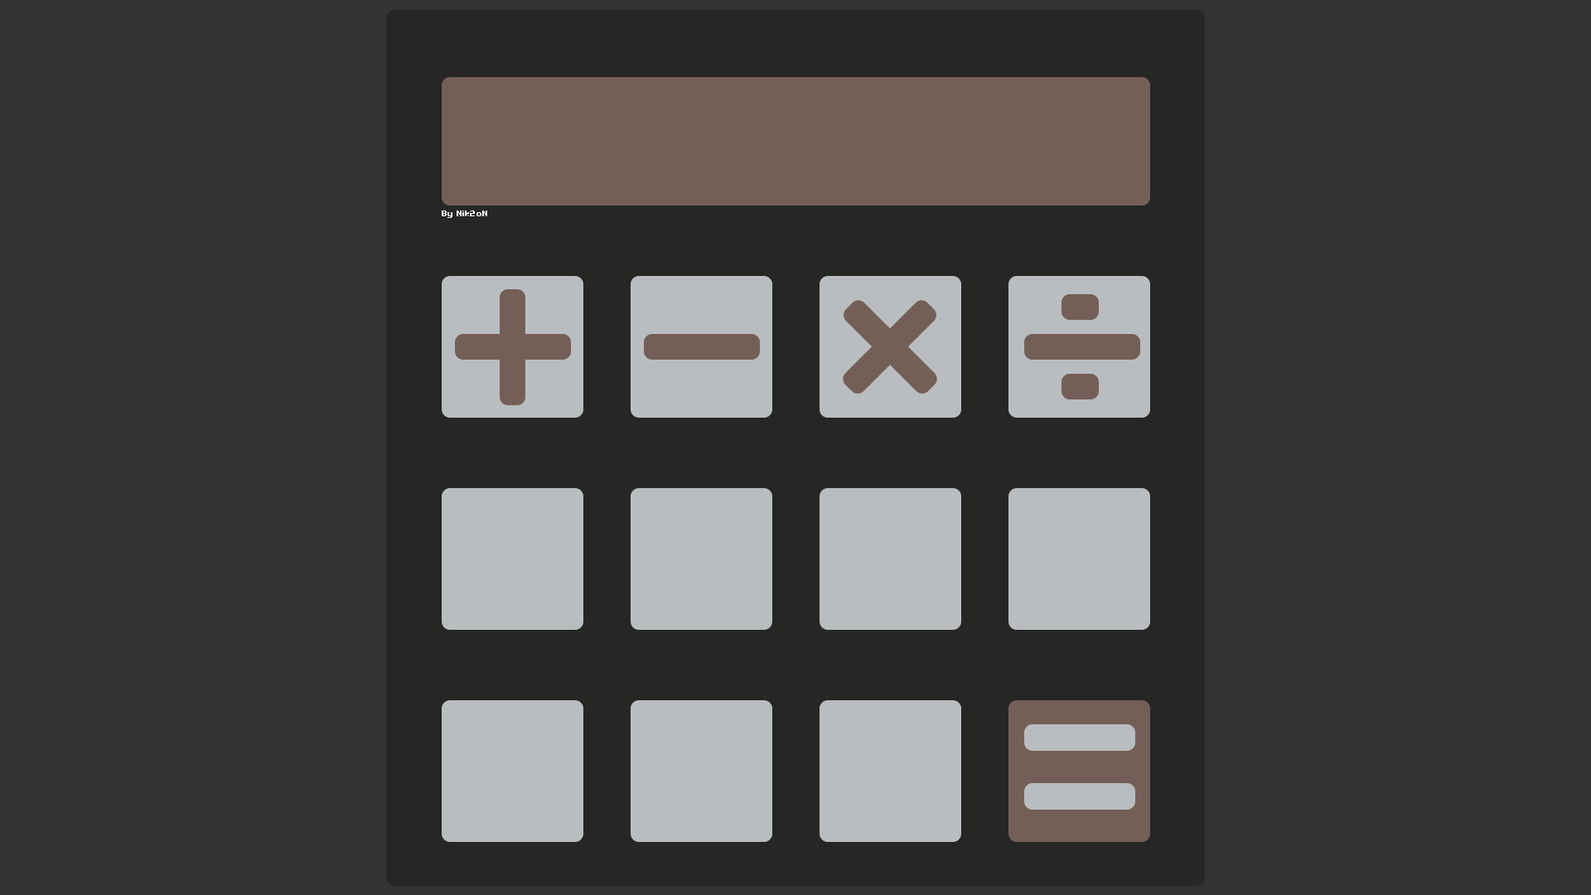
<style>
.page{position:relative;width:1591px;height:895px;background:#333333}
.page>*{position:absolute;margin:0}
.t1{font:9px "22ndBold";letter-spacing:0.1em;color:#ffffff}
</style>
<div class="page">
<p class="t1" style="left:442px;top:210px;width:45px;height:8px">By Nik2oN</p>
</div>
